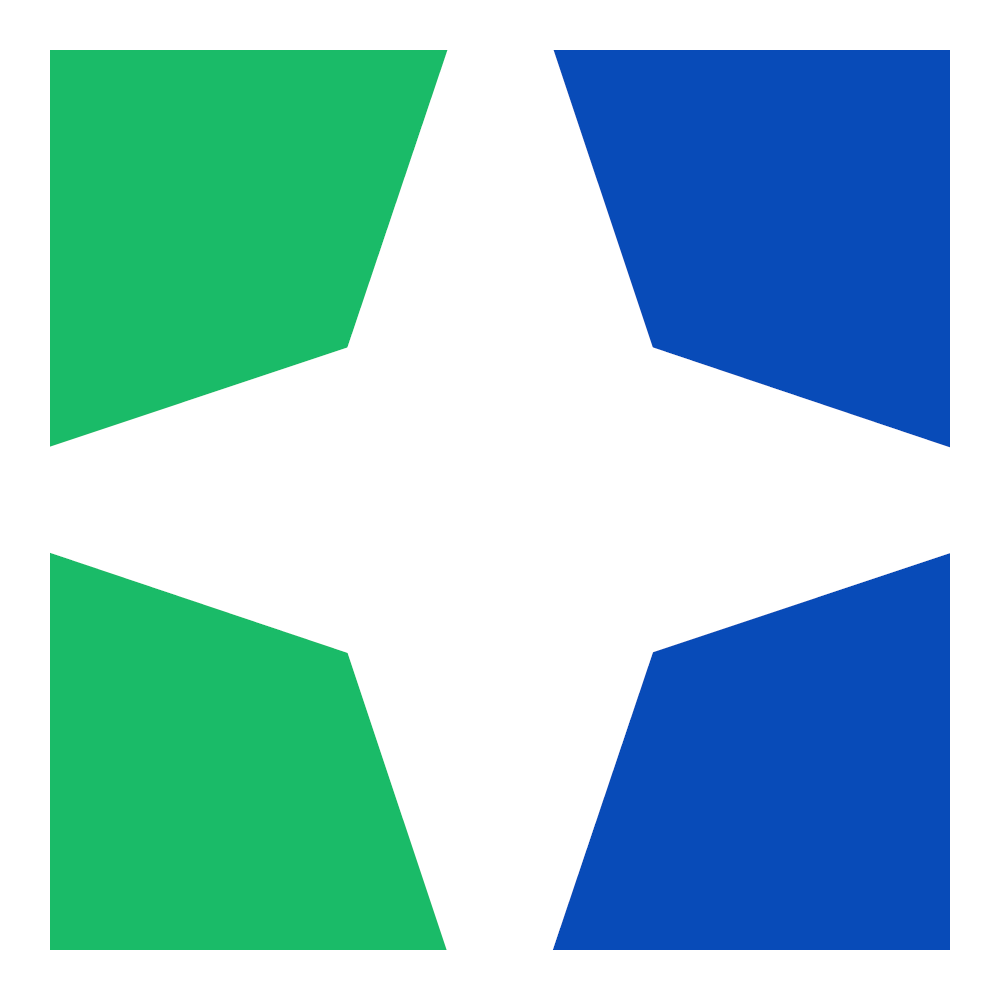
<style>
.page{position:relative;width:1000px;height:1000px;background:#ffffff}
.page>*{position:absolute;margin:0}
.t1{font:530.2px "Roboto-Black";color:#ffffff;font-weight:bold}
</style>
<div class="page">
<p class="t1" style="left:322px;top:44px;width:356px;height:383px;rotate:180deg">V</p>
<p class="t1" style="left:44px;top:322px;width:383px;height:357px;rotate:90deg">V</p>
<p class="t1" style="left:573px;top:321px;width:382px;height:357px;rotate:-90deg">V</p>
<p class="t1" style="left:322px;top:573px;width:357px;height:383px">V</p>
</div>
